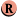
<style>
.page{position:relative;width:17px;height:17px;background:#ed9884}
.page>*{position:absolute;margin:0}
.t1{font:15.5px "Matrix-Bold";color:#000000}
</style>
<div class="page">
<p class="t1" style="left:5px;top:3px;width:9px;height:10px">R</p>
</div>
